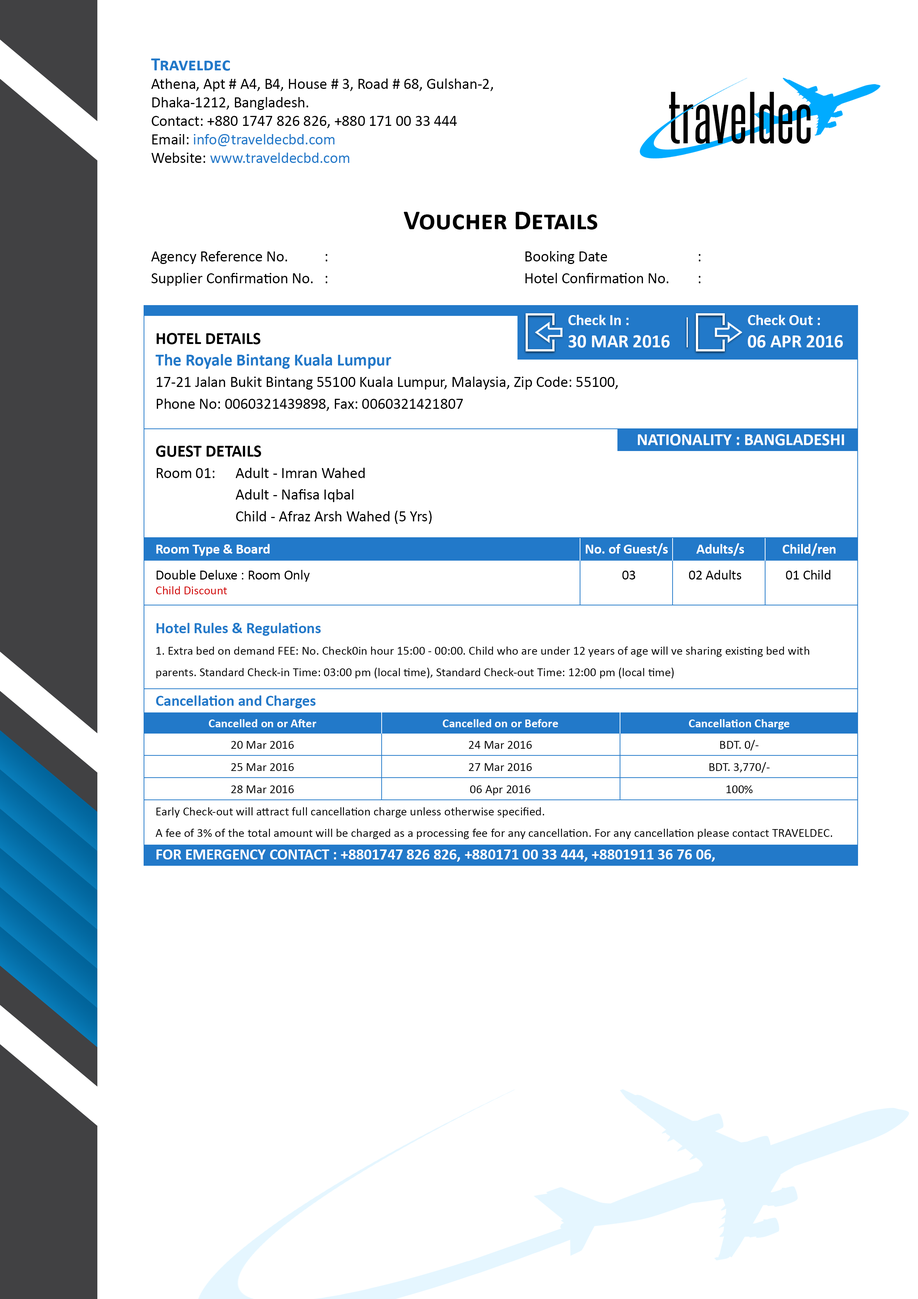
<style>
.page{position:relative;width:918px;height:1299px;background:#ffffff}
.page>*{position:absolute;margin:0}
.t1{font:15.4px "Calibri";color:#000000}
.t2{font:18.5px "Calibri-Bold";color:#2279c9;font-variant:small-caps}
.t3{font:15.4px "Calibri";color:#2279c9}
.t4{font:62.5px "SteelfishRg-Regular";letter-spacing:0.01em;color:#000000}
.t5{font:27.8px "Calibri-Bold";color:#000000;font-variant:small-caps}
.t6{font:15.4px/21.6px "Calibri";color:#000000}
.t7{font:18.5px "Calibri-Bold";color:#ffffff}
.t8{font:15.4px "Calibri-Bold";color:#ffffff}
.t9{font:17px/21.6px "Calibri-Bold";color:#000000}
.t10{font:17px/21.6px "Calibri-Bold";color:#2279c9}
.t11{font:17px "Calibri-Bold";color:#ffffff}
.t12{font:13.9px "Calibri-Bold";color:#ffffff}
.t13{font:13.9px/21.6px "Calibri";color:#000000}
.t14{font:12.3px "Calibri";color:#d10000}
.t15{font:12.3px/21.6px "Calibri";color:#000000}
.t16{font:15.4px/21.6px "Calibri-Bold";color:#2279c9}
.t17{font:15.4px "Calibri-Bold";color:#2279c9}
.t18{font:12.3px "Calibri-Bold";color:#ffffff}
.t19{font:12.3px "Calibri";color:#000000}
</style>
<div class="page">
<p class="t1" style="left:151px;top:58px;width:342px;height:105px"><span class="t2">Traveldec<br></span>Athena, Apt # A4, B4, House # 3, Road # 68, Gulshan-2, <br>Dhaka-1212, Bangladesh.<br>Contact: +880 1747 826 826, +880 171 00 33 444<br>Email: <span class="t3">info@traveldecbd.com</span> <br>Website: <span class="t3">www.traveldecbd.com</span></p>
<p class="t4" style="left:669px;top:92px;width:142px;height:52px">traveldec</p>
<p class="t5" style="left:404px;top:212px;width:194px;height:18px">Voucher Details</p>
<p class="t6" style="left:151px;top:251px;width:550px;height:35px">Agency Reference No.   :               Booking Date       :<br>Supplier Confirmation No. :               Hotel Confirmation No.   :</p>
<p class="t7" style="left:568px;top:315px;width:102px;height:33px"><span class="t8">Check In :<br></span>30 MAR 2016</p>
<p class="t8" style="left:748px;top:315px;width:95px;height:33px">Check Out :<br><span class="t7">06 APR 2016</span></p>
<p class="t6" style="left:155px;top:333px;width:463px;height:78px"><span class="t9">HOTEL DETAILS<br></span><span class="t10">The Royale Bintang Kuala Lumpur<br></span>17-21 Jalan Bukit Bintang 55100 Kuala Lumpur, Malaysia, Zip Code: 55100,<br>Phone No: 0060321439898, Fax: 0060321421807</p>
<p class="t11" style="left:638px;top:434px;width:206px;height:11px">NATIONALITY : BANGLADESHI</p>
<p class="t6" style="left:156px;top:445px;width:276px;height:79px"><span class="t9">GUEST DETAILS<br></span>Room 01:  Adult - Imran Wahed<br>      Adult - Nafisa Iqbal<br>      Child - Afraz Arsh Wahed (5 Yrs)</p>
<p class="t12" style="left:156px;top:543px;width:680px;height:13px">Room Type &amp; Board                         No. of Guest/s         Adults/s            Child/ren</p>
<p class="t13" style="left:156px;top:570px;width:675px;height:24px">Double Deluxe : Room Only                         03           02 Adults              01 Child<br><span class="t14">Child Discount</span></p>
<p class="t15" style="left:156px;top:623px;width:653px;height:55px"><span class="t16">Hotel Rules &amp; Regulations<br></span>1. Extra bed on demand FEE: No. Check0in hour 15:00 - 00:00. Child who are under 12 years of age will ve sharing existing bed with parents. Standard Check-in Time: 03:00 pm (local time), Standard Check-out Time: 12:00 pm (local time)</p>
<p class="t17" style="left:156px;top:695px;width:160px;height:13px">Cancellation and Charges</p>
<p class="t18" style="left:209px;top:719px;width:108px;height:8px">Cancelled on or After</p>
<p class="t18" style="left:443px;top:719px;width:115px;height:8px">Cancelled on or Before</p>
<p class="t18" style="left:689px;top:719px;width:101px;height:10px">Cancellation Charge</p>
<p class="t19" style="left:231px;top:741px;width:63px;height:8px">20 Mar 2016</p>
<p class="t19" style="left:469px;top:741px;width:63px;height:8px">24 Mar 2016</p>
<p class="t19" style="left:720px;top:740px;width:39px;height:10px">BDT. 0/-</p>
<p class="t19" style="left:709px;top:762px;width:61px;height:11px">BDT. 3,770/-</p>
<p class="t19" style="left:231px;top:763px;width:63px;height:8px">25 Mar 2016</p>
<p class="t19" style="left:469px;top:763px;width:63px;height:8px">27 Mar 2016</p>
<p class="t19" style="left:231px;top:785px;width:63px;height:8px">28 Mar 2016</p>
<p class="t19" style="left:470px;top:785px;width:61px;height:10px">06 Apr 2016</p>
<p class="t19" style="left:726px;top:785px;width:27px;height:8px">100%</p>
<p class="t15" style="left:155px;top:807px;width:677px;height:32px">Early Check-out will attract full cancellation charge unless otherwise specified. <br>A fee of 3% of the total amount will be charged as a processing fee for any cancellation. For any cancellation please contact TRAVELDEC.</p>
<p class="t8" style="left:156px;top:849px;width:559px;height:13px">FOR EMERGENCY CONTACT : +8801747 826 826, +880171 00 33 444, +8801911 36 76 06,</p>
</div>
